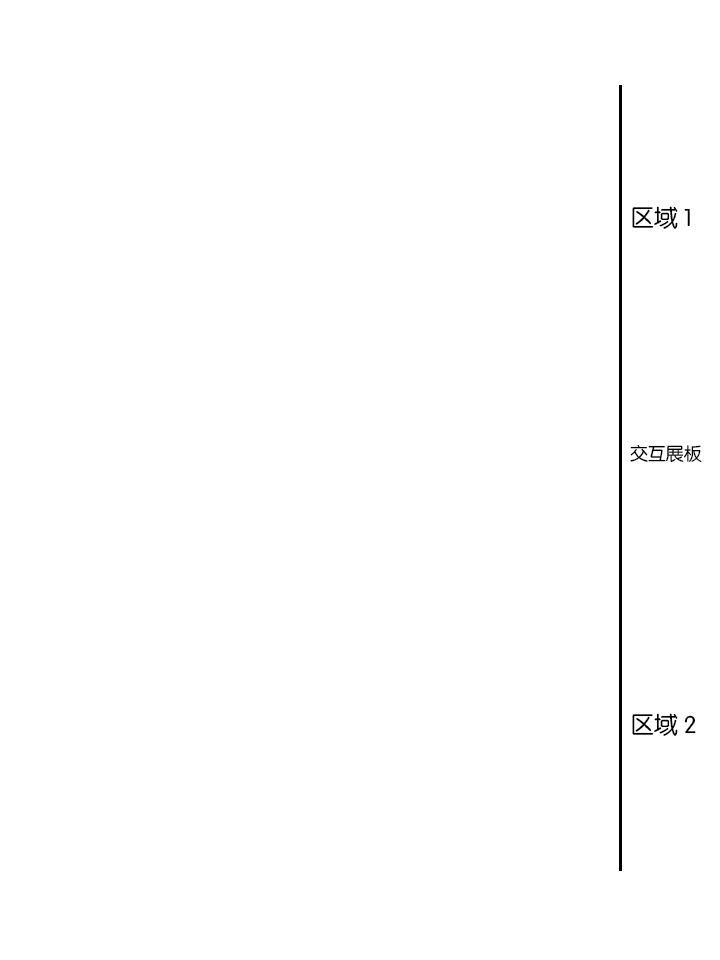
<style>
.page{position:relative;width:720px;height:960px;background:#ffffff}
.page>*{position:absolute;margin:0}
.t1{font:24px "FZY3K--GBK1-0";color:#000000}
.t2{font:18px "FZY3K--GBK1-0";color:#000000}
</style>
<div class="page">
<p class="t1" style="left:632px;top:206px;width:58px;height:23px">区域1</p>
<p class="t2" style="left:630px;top:445px;width:72px;height:18px">交互展板</p>
<p class="t1" style="left:632px;top:713px;width:64px;height:23px">区域2</p>
</div>
